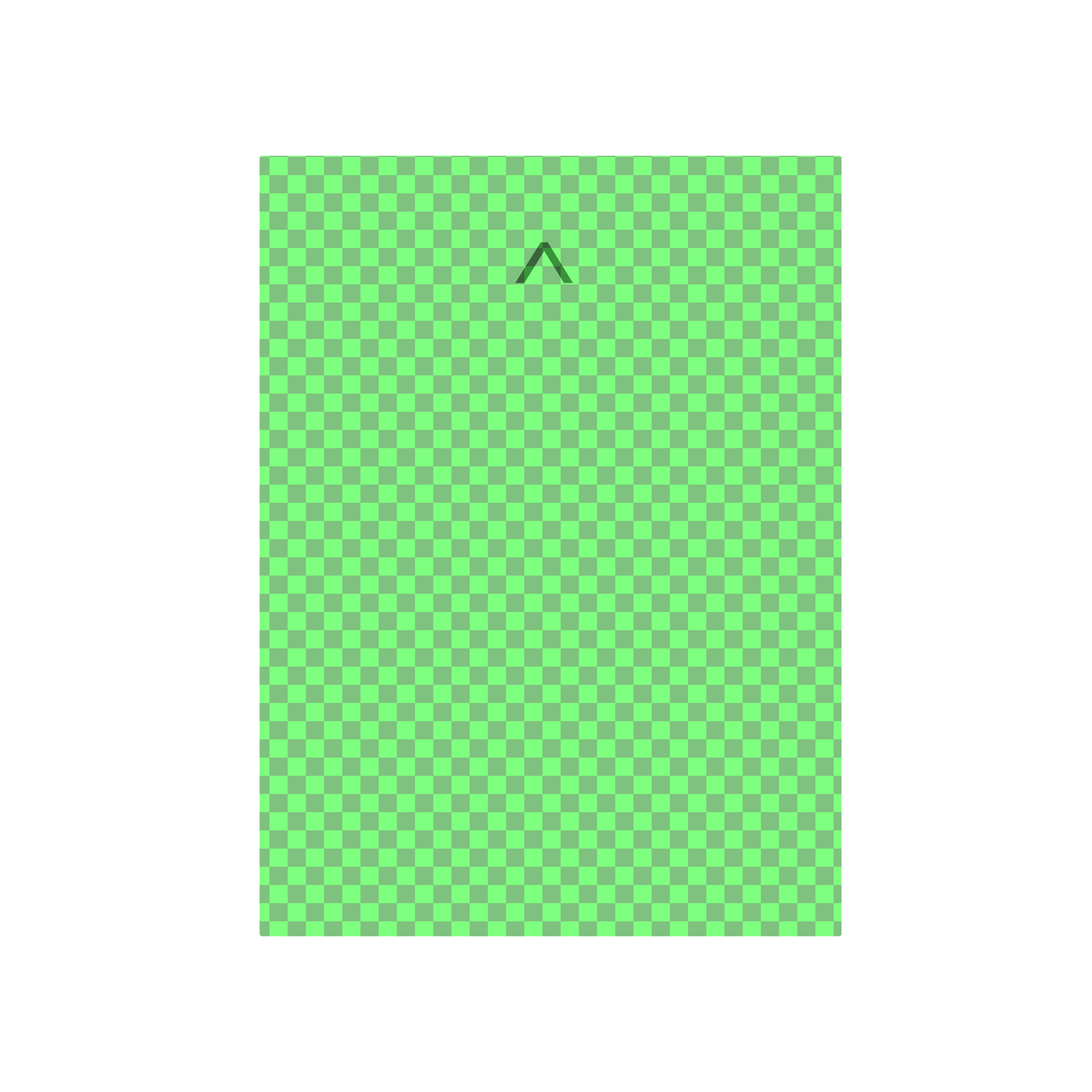
<style>
.page{position:relative;width:1092px;height:1092px;background:#ffffff}
.page>*{position:absolute;margin:0}
.t1{font:126.4px "Georgia";letter-spacing:-0.03em}
</style>
<div class="page">
<p class="t1" style="left:515px;top:242px;width:58px;height:41px">^</p>
</div>
